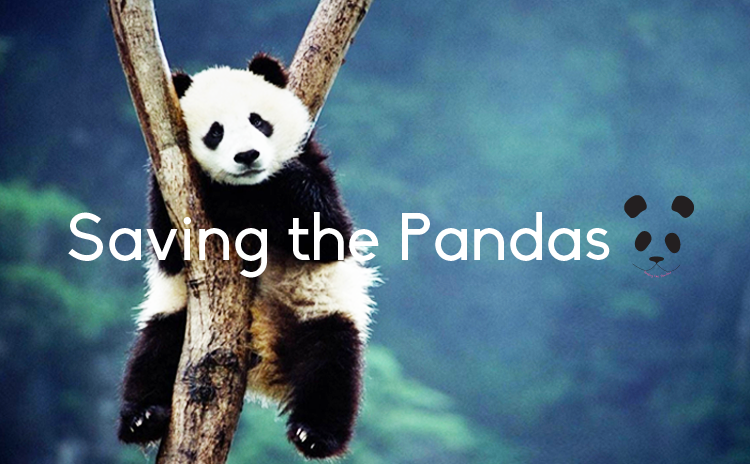
<style>
.page{position:relative;width:750px;height:464px}
.page>*{position:absolute;margin:0}
.t1{font:66.7px "Biko";letter-spacing:0.01em;color:#ffffff}
</style>
<div class="page">
<p class="t1" style="left:68px;top:212px;width:542px;height:66px">Saving the Pandas</p>
</div>
